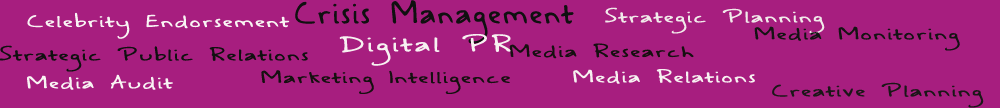
<style>
.page{position:relative;width:1000px;height:108px;background:#a71e7f}
.page>*{position:absolute;margin:0}
.t1{font:30.6px "ASafePlacetoFall";letter-spacing:0.075em;color:#101010;scale:1.06 1}
.t2{font:16.8px "ASafePlacetoFall";letter-spacing:0.075em;color:#f9f4f4;scale:1.5 1}
.t3{font:16.8px "ASafePlacetoFall";letter-spacing:0.075em;color:#f1eaea;scale:1.5 1}
.t4{font:21.6px "ASafePlacetoFall";letter-spacing:0.1em;color:#f7f1f1;scale:1.5 1}
.t5{font:16.8px "ASafePlacetoFall";letter-spacing:0.075em;color:#101010;scale:1.5 1}
.t6{font:16.8px "ASafePlacetoFall";letter-spacing:0.075em;color:#151010;scale:1.5 1}
.t7{font:16.8px "ASafePlacetoFall";letter-spacing:0.075em;color:#f7f1f1;scale:1.5 1}
.t8{font:16.8px "ASafePlacetoFall";letter-spacing:0.075em;color:#1a1717;scale:1.5 1}
</style>
<div class="page">
<p class="t1" style="left:295px;top:0px;width:279px;height:44px">Crisis Management</p>
<p class="t2" style="left:27px;top:12px;width:263px;height:27px">Celebrity Endorsement</p>
<p class="t3" style="left:605px;top:7px;width:220px;height:27px">Strategic Planning</p>
<p class="t4" style="left:339px;top:34px;width:172px;height:32px">Digital PR</p>
<p class="t5" style="left:0px;top:45px;width:308px;height:27px">Strategic Public Relations</p>
<p class="t6" style="left:509px;top:43px;width:185px;height:16px">Media Research</p>
<p class="t2" style="left:27px;top:74px;width:146px;height:16px">Media Audit</p>
<p class="t6" style="left:261px;top:70px;width:249px;height:24px">Marketing Intelligence</p>
<p class="t7" style="left:573px;top:69px;width:182px;height:15px">Media Relations</p>
<p class="t8" style="left:772px;top:82px;width:212px;height:26px">Creative Planning</p>
</div>
